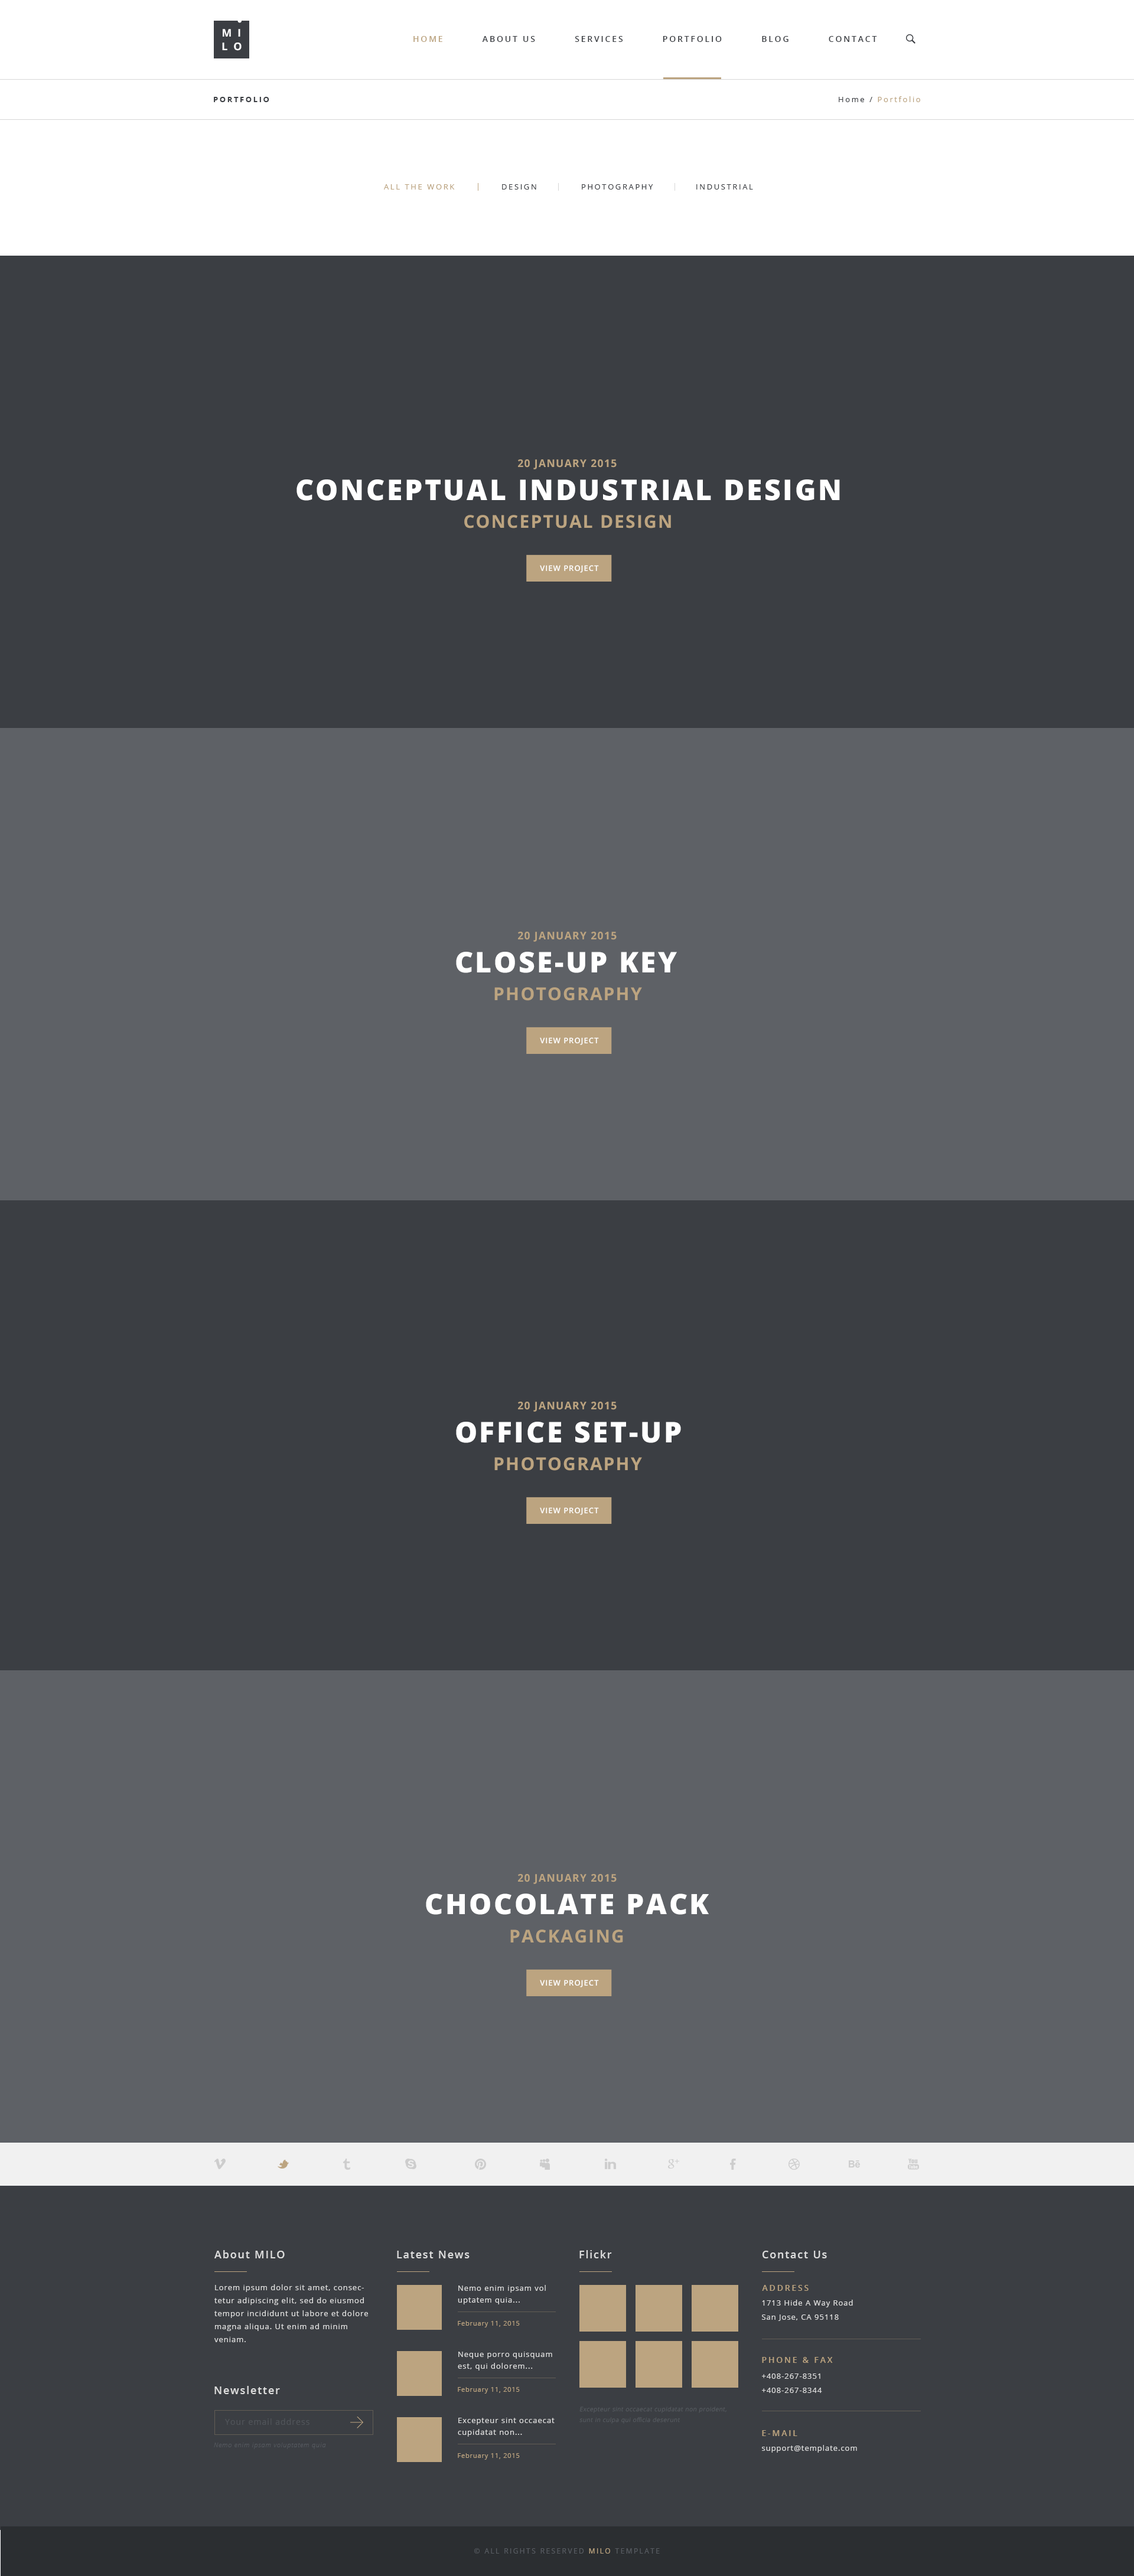
<style>
.page{position:relative;width:1134px;height:2576px;background:#3b3e43}
.page>*{position:absolute;margin:0}
.t1{font:10.6px "OpenSans-Bold";letter-spacing:0.55em;color:#ffffff;text-transform:uppercase}
.t2{font:8.3px "OpenSans-Semibold";letter-spacing:0.2em;color:#3b3e43;text-transform:uppercase}
.t3{font:8.3px "OpenSans-Semibold";letter-spacing:0.2em;color:#bca480;text-transform:uppercase}
.t4{font:7.7px "OpenSans-Bold";letter-spacing:0.2em;color:#3b3e43;text-transform:uppercase}
.t5{font:7.7px "OpenSans";letter-spacing:0.2em;color:#bca480}
.t6{font:7.7px "OpenSans";letter-spacing:0.2em;color:#3b3e43}
.t7{font:7.7px "OpenSans";letter-spacing:0.2em;color:#bca480;text-transform:uppercase}
.t8{font:7.7px "OpenSans";letter-spacing:0.2em;color:#3b3e43;text-transform:uppercase}
.t9{font:10.7px "OpenSans-Bold";letter-spacing:0.075em;color:#bca480;text-transform:uppercase}
.t10{font:28.5px "OpenSans-Extrabold";letter-spacing:0.075em;color:#ffffff;text-transform:uppercase}
.t11{font:17.7px "OpenSans-Bold";letter-spacing:0.075em;color:#bca480;text-transform:uppercase}
.t12{font:7.7px "OpenSans-Semibold";letter-spacing:0.075em;color:#ffffff;text-transform:uppercase}
.t13{font:28.2px "OpenSans-Extrabold";letter-spacing:0.075em;color:#ffffff;text-transform:uppercase}
.t14{font:10.6px "OpenSans-Semibold";letter-spacing:0.1em;color:#dddddd}
.t15{font:7.7px/13px "OpenSans";letter-spacing:0.075em;color:#dddddd}
.t16{font:7.7px/11.8px "OpenSans";letter-spacing:0.075em;color:#dddddd}
.t17{font:7.7px/14.2px "OpenSans";letter-spacing:0.075em;color:#dddddd}
.t18{font:6.5px "OpenSans";letter-spacing:0.075em;color:#bca480}
.t19{font:7.7px/14.2px "OpenSans-Semibold";letter-spacing:0.075em;color:#dddddd}
.t20{font:5.9px/10.6px "OpenSans-Light";letter-spacing:0.075em;color:#585c62;font-style:italic}
.t21{font:8.3px "OpenSans";letter-spacing:0.075em;color:#505459}
.t22{font:6.5px "OpenSansLight-Italic";letter-spacing:0.075em;color:#53575d}
.t23{font:7.7px "OpenSans";letter-spacing:0.075em;color:#dddddd}
.t24{font:7.1px "OpenSans";letter-spacing:0.2em;color:#585c62;text-transform:uppercase}
.t25{font:7.1px "OpenSans";letter-spacing:0.2em;color:#bca480;text-transform:uppercase}
</style>
<div class="page">
<p class="t1" style="left:223px;top:29px;width:17px;height:8px">mi</p>
<p class="t2" style="left:413px;top:36px;width:464px;height:6px"><span class="t3">Home          </span>About Us          Services          Portfolio          Blog          Contact</p>
<p class="t1" style="left:222px;top:43px;width:19px;height:8px">lo</p>
<p class="t4" style="left:214px;top:97px;width:55px;height:5px">Portfolio</p>
<p class="t5" style="left:838px;top:96px;width:82px;height:6px"><span class="t6">Home / </span>Portfolio</p>
<p class="t7" style="left:384px;top:184px;width:71px;height:6px">all the work</p>
<p class="t8" style="left:502px;top:184px;width:34px;height:6px">Design</p>
<p class="t8" style="left:582px;top:184px;width:71px;height:6px">Photography</p>
<p class="t8" style="left:696px;top:184px;width:57px;height:6px">industrial</p>
<p class="t9" style="left:518px;top:459px;width:98px;height:10px">20 January 2015</p>
<p class="t10" style="left:296px;top:479px;width:544px;height:22px">Conceptual industrial design</p>
<p class="t11" style="left:464px;top:515px;width:207px;height:13px">conceptual design</p>
<p class="t12" style="left:540px;top:565px;width:59px;height:8px">view project</p>
<p class="t9" style="left:518px;top:932px;width:98px;height:10px">20 January 2015</p>
<p class="t10" style="left:456px;top:952px;width:221px;height:21px">close-up key</p>
<p class="t11" style="left:494px;top:987px;width:148px;height:14px">photography</p>
<p class="t12" style="left:540px;top:1037px;width:59px;height:8px">view project</p>
<p class="t9" style="left:518px;top:1402px;width:98px;height:10px">20 January 2015</p>
<p class="t10" style="left:456px;top:1422px;width:225px;height:21px">office set-up</p>
<p class="t11" style="left:494px;top:1457px;width:148px;height:14px">photography</p>
<p class="t12" style="left:540px;top:1507px;width:59px;height:8px">view project</p>
<p class="t9" style="left:518px;top:1874px;width:98px;height:10px">20 January 2015</p>
<p class="t13" style="left:426px;top:1893px;width:283px;height:22px">chocolate pack</p>
<p class="t11" style="left:510px;top:1929px;width:113px;height:14px">packaging</p>
<p class="t12" style="left:540px;top:1980px;width:59px;height:7px">view project</p>
<p class="t14" style="left:214px;top:2250px;width:71px;height:8px">About MILO</p>
<p class="t14" style="left:397px;top:2251px;width:72px;height:7px">Latest News</p>
<p class="t14" style="left:579px;top:2250px;width:33px;height:8px">Flickr</p>
<p class="t14" style="left:762px;top:2251px;width:65px;height:7px">Contact Us</p>
<p class="t15" style="left:214px;top:2284px;width:154px;height:58px">Lorem ipsum dolor sit amet, consectetur adipiscing elit, sed do eiusmod tempor incididunt ut labore et dolore magna aliqua. Ut enim ad minim veniam.</p>
<p class="t16" style="left:458px;top:2285px;width:88px;height:19px">Nemo enim ipsam vol uptatem quia...</p>
<p class="t3" style="left:762px;top:2285px;width:46px;height:6px">Address</p>
<p class="t17" style="left:762px;top:2300px;width:91px;height:21px">1713 Hide A Way Road<br>San Jose, CA 95118</p>
<p class="t18" style="left:458px;top:2321px;width:62px;height:6px">February 11, 2015</p>
<p class="t16" style="left:458px;top:2352px;width:94px;height:19px">Neque porro quisquam est, qui dolorem...</p>
<p class="t3" style="left:762px;top:2357px;width:70px;height:6px">Phone &amp; Fax</p>
<p class="t17" style="left:762px;top:2373px;width:60px;height:20px"><span class="t19"><br></span>+408-267-8351<br>+408-267-8344</p>
<p class="t14" style="left:214px;top:2386px;width:66px;height:8px">Newsletter</p>
<p class="t18" style="left:458px;top:2387px;width:62px;height:7px">February 11, 2015</p>
<p class="t16" style="left:458px;top:2418px;width:96px;height:19px">Excepteur sint occaecat cupidatat non...</p>
<p class="t20" style="left:579px;top:2407px;width:147px;height:17px">Excepteur sint occaecat cupidatat non proident, sunt in culpa qui officia deserunt</p>
<p class="t21" style="left:225px;top:2418px;width:84px;height:7px">Your email address</p>
<p class="t3" style="left:762px;top:2430px;width:35px;height:6px">E-mail</p>
<p class="t22" style="left:214px;top:2443px;width:112px;height:6px">Nemo enim ipsam voluptatem quia</p>
<p class="t18" style="left:458px;top:2453px;width:62px;height:7px">February 11, 2015</p>
<p class="t23" style="left:762px;top:2445px;width:95px;height:8px">support@template.com</p>
<p class="t24" style="left:474px;top:2548px;width:185px;height:6px">© All Rights Reserved <span class="t25">MILO</span> template</p>
</div>
